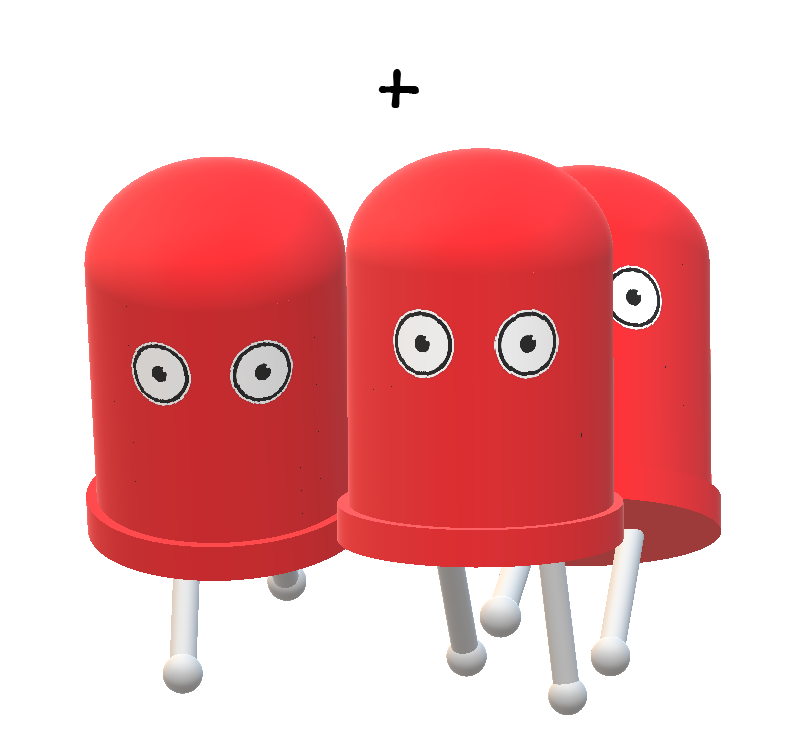
<style>
.page{position:relative;width:798px;height:739px;background:#ffffff}
.page>*{position:absolute;margin:0}
.t1{font:80px "SegoePrint-Bold";color:#000000}
</style>
<div class="page">
<p class="t1" style="left:378px;top:69px;width:41px;height:39px">+</p>
</div>
